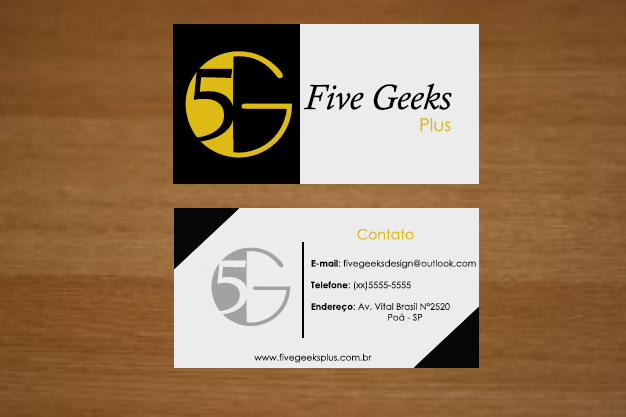
<style>
.page{position:relative;width:626px;height:417px;background:#ececec}
.page>*{position:absolute;margin:0}
.t1{font:149.6px "Broadway";color:#ddba14}
.t2{font:107.7px "Constantia";color:#010101}
.t3{font:35.9px "CalistoMT-Italic";color:#010101}
.t4{font:18px "CenturyGothic";color:#ddba14}
.t5{font:14px "CenturyGothic";color:#ddba14}
.t6{font:110.6px "Broadway";color:#a2a2a2}
.t7{font:79.6px "Constantia";color:#ececec}
.t8{font:9px "CenturyGothic";color:#020202}
.t9{font:9px "CenturyGothic-Bold";color:#020202}
</style>
<div class="page">
<p class="t1" style="left:185px;top:51px;width:107px;height:107px">G</p>
<p class="t2" style="left:191px;top:68px;width:43px;height:74px">5</p>
<p class="t3" style="left:303px;top:83px;width:149px;height:27px">Five Geeks</p>
<p class="t4" style="left:420px;top:117px;width:31px;height:15px">Plus</p>
<p class="t5" style="left:357px;top:228px;width:57px;height:12px">Contato</p>
<p class="t6" style="left:211px;top:247px;width:80px;height:79px">G</p>
<p class="t7" style="left:215px;top:260px;width:33px;height:55px">5</p>
<p class="t8" style="left:311px;top:259px;width:165px;height:62px"><span class="t9">E-mail</span>: fivegeeksdesign@outlook.com<br><br><span class="t9">Telefone</span>: (xx)5555-5555<br><br><span class="t9">Endereço</span>: Av. Vital Brasil N°2520<br> Poá - SP</p>
<p class="t8" style="left:254px;top:353px;width:118px;height:10px">www.fivegeeksplus.com.br</p>
</div>
